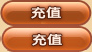
<style>
.page{position:relative;width:92px;height:52px}
.page>*{position:absolute;margin:0}
.t1{font:12px "HYe3gj";letter-spacing:0.05em;color:#ffeee1;font-weight:bold;scale:1.2 1}
</style>
<div class="page">
<p class="t1" style="left:31px;top:6px;width:31px;height:13px">充值</p>
<p class="t1" style="left:32px;top:33px;width:31px;height:13px">充值</p>
</div>
